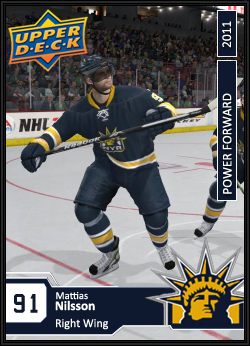
<style>
.page{position:relative;width:250px;height:346px}
.page>*{position:absolute;margin:0}
.t1{font:13.3px "Calibri";color:#ffffff}
.t2{font:18.7px "NHL_Edge_Pittsburgh";color:#0e192f}
.t3{font:10.7px "Calibri";color:#ffffff}
.t4{font:13.3px "Calibri-Bold";color:#ffffff}
.t5{font:12px "Calibri";color:#ffffff}
</style>
<div class="page">
<p class="t1" style="left:222px;top:21px;width:10px;height:173px;rotate:-90deg">POWER FORWARD               2011</p>
<p class="t2" style="left:14px;top:294px;width:24px;height:19px">91</p>
<p class="t3" style="left:56px;top:292px;width:32px;height:8px">Mattias</p>
<p class="t4" style="left:55px;top:300px;width:40px;height:11px">Nilsson</p>
<p class="t5" style="left:56px;top:318px;width:52px;height:12px">Right Wing</p>
</div>
